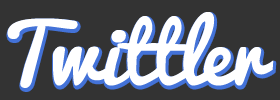
<style>
.page{position:relative;width:280px;height:100px;background:#333333}
.page>*{position:absolute;margin:0}
.t1{font:79.3px "Pacifico";color:#ffffff}
.t2{font:79.3px "Pacifico";letter-spacing:-0.1em;color:#ffffff}
</style>
<div class="page">
<p class="t1" style="left:7px;top:12px;width:267px;height:76px"><span class="t2">T</span>wittler</p>
</div>
